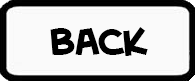
<style>
.page{position:relative;width:195px;height:81px;background:#fafafa}
.page>*{position:absolute;margin:0}
.t1{font:38px "CreativeBlockBBBold";letter-spacing:-0.05em;color:#000000}
</style>
<div class="page">
<p class="t1" style="left:50px;top:27px;width:98px;height:29px">Back</p>
</div>
